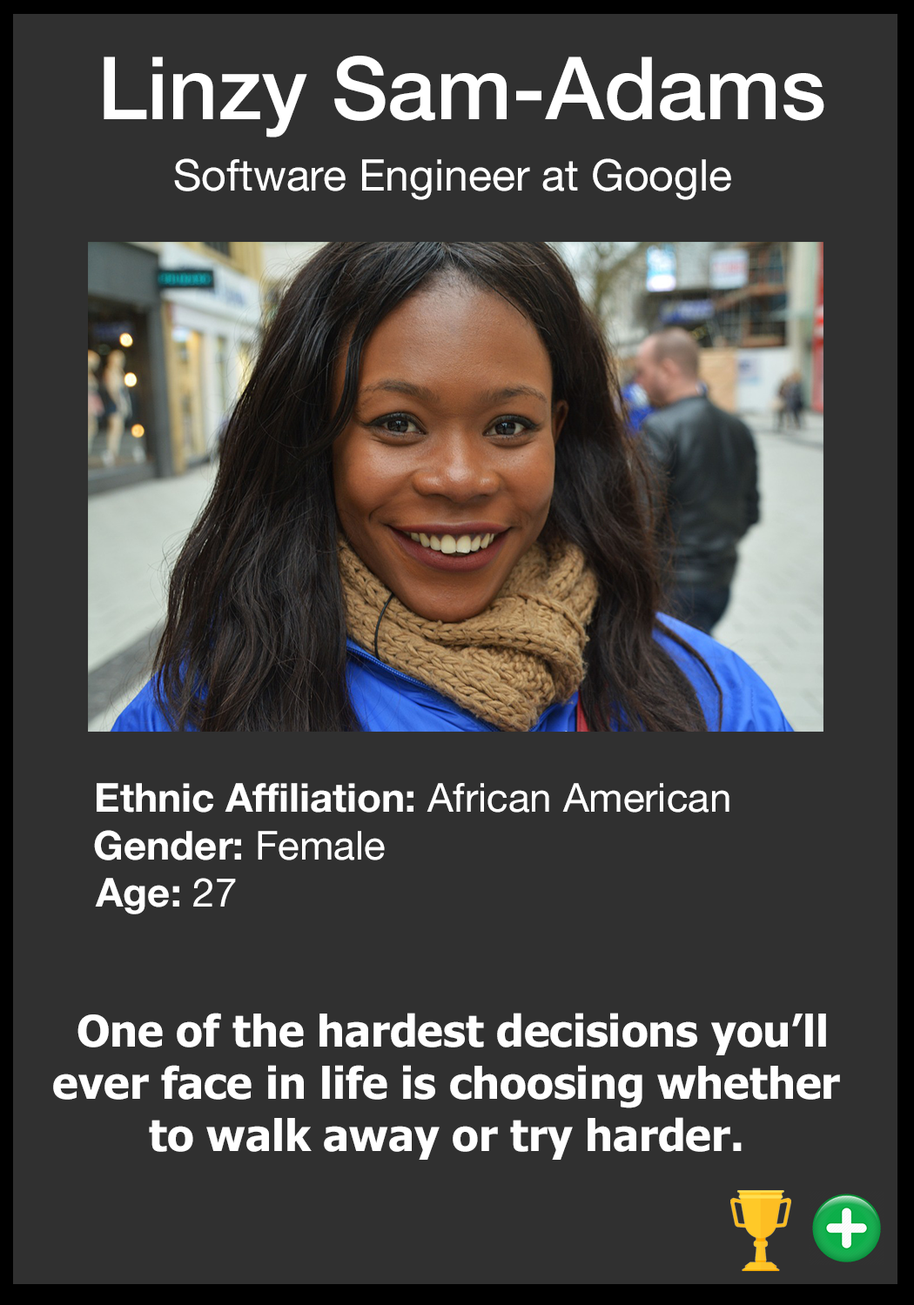
<style>
.page{position:relative;width:914px;height:1305px;background:#303030}
.page>*{position:absolute;margin:0}
.t1{font:87px "HelveticaNeue-Medium";color:#ffffff}
.t2{font:43.5px "HelveticaNeue";color:#ffffff}
.t3{font:39.9px "HelveticaNeue-Bold";color:#ffffff}
.t4{font:39.9px "HelveticaNeue";color:#ffffff}
.t5{font:43.5px "Tahoma-Bold";color:#ffffff}
</style>
<div class="page">
<p class="t1" style="left:104px;top:56px;width:720px;height:81px">Linzy Sam-Adams</p>
<p class="t2" style="left:174px;top:158px;width:557px;height:42px">Software Engineer at Google</p>
<p class="t3" style="left:97px;top:783px;width:632px;height:30px">Ethnic Affiliation:<span class="t4"> African American</span></p>
<p class="t3" style="left:94px;top:830px;width:291px;height:31px">Gender: <span class="t4">Female</span></p>
<p class="t3" style="left:95px;top:878px;width:141px;height:36px">Age: <span class="t4">27</span></p>
<p class="t5" style="left:53px;top:1013px;width:787px;height:147px;text-align:center">One of the hardest decisions you’ll<br>ever face in life is choosing whether <br>to walk away or try harder.</p>
</div>
